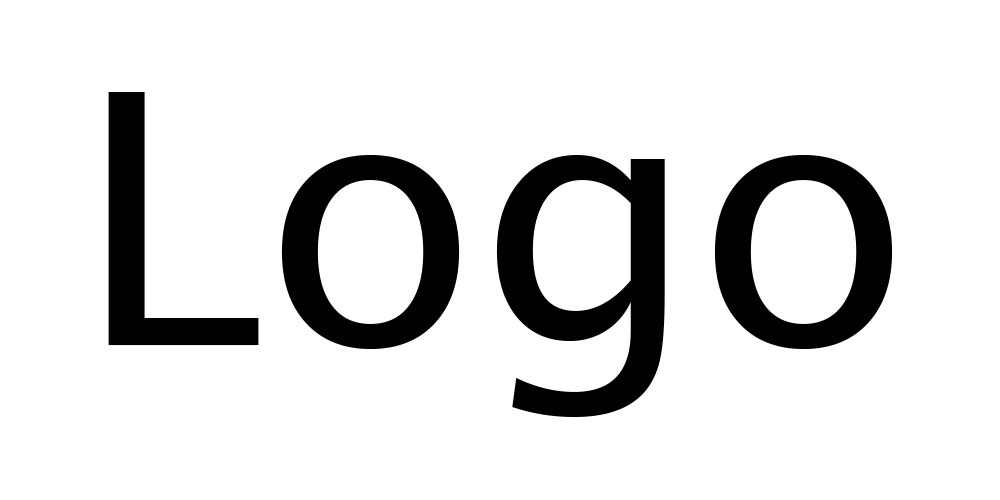
<style>
.page{position:relative;width:1000px;height:500px;background:#ffffff}
.page>*{position:absolute;margin:0}
.t1{font:350px "LucidaSansUnicode";color:#000000}
</style>
<div class="page">
<p class="t1" style="left:108px;top:92px;width:785px;height:325px">Logo</p>
</div>
